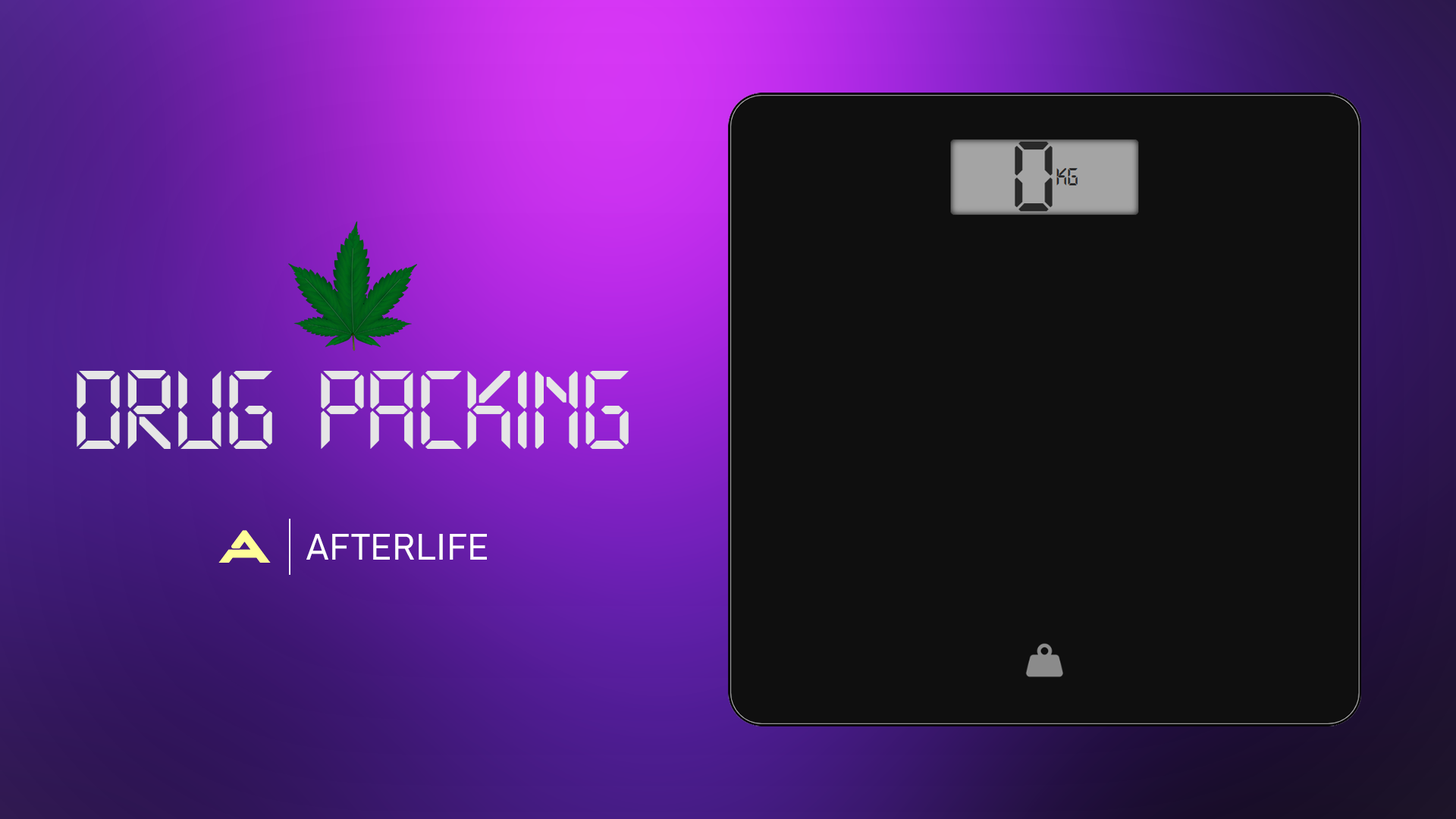
<style>
.page{position:relative;width:1456px;height:819px;background:#0f0f0f}
.page>*{position:absolute;margin:0}
.t1{font:113.7px "Technology-Regular";color:#e6e6e6}
.t2{font:36.4px "Bahnschrift-SemiLight";color:#ffffff}
</style>
<div class="page">
<p class="t1" style="left:77px;top:370px;width:552px;height:79px">DRUG PACKING</p>
<p class="t2" style="left:306px;top:534px;width:181px;height:26px">AFTERLIFE</p>
</div>
